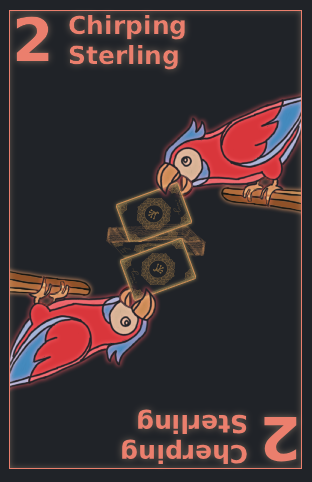
<style>
.page{position:relative;width:312px;height:482px;background:#202328}
.page>*{position:absolute;margin:0}
.t1{font:60px "DejaVuSans-Bold";color:#eb7f6d}
.t2{font:25px "DejaVuSans-Bold";color:#eb7f6d}
</style>
<div class="page">
<p class="t1" style="left:16px;top:16px;width:33px;height:45px">2</p>
<p class="t2" style="left:69px;top:15px;width:116px;height:55px">Chirping <br>Sterling</p>
<p class="t2" style="left:122px;top:409px;width:125px;height:55px;rotate:180deg">Cherping<br>Sterling</p>
<p class="t1" style="left:264px;top:417px;width:33px;height:45px;rotate:180deg">2</p>
</div>
